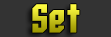
<style>
.page{position:relative;width:111px;height:37px;background:#333333}
.page>*{position:absolute;margin:0}
.t1{font:39.9px "Whitestone-Bold"}
</style>
<div class="page">
<p class="t1" style="left:32px;top:4px;width:48px;height:29px">Set</p>
</div>
